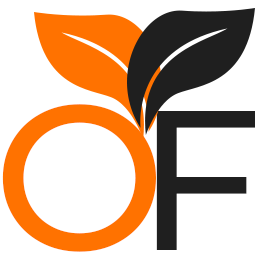
<style>
.page{position:relative;width:258px;height:258px;background:#ffffff}
.page>*{position:absolute;margin:0}
.t1{font:205.8px "Montserrat-Medium";letter-spacing:-0.02em;color:#ff7200}
.t2{font:198.6px "Montserrat-Medium";letter-spacing:-0.02em;color:#1f1f1f}
</style>
<div class="page">
<p class="t1" style="left:2px;top:104px;width:154px;height:148px">O</p>
<p class="t2" style="left:156px;top:111px;width:99px;height:139px">F</p>
</div>
